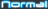
<style>
.page{position:relative;width:48px;height:9px;background:#333333}
.page>*{position:absolute;margin:0}
.t1{font:10px "ThundergodII";color:#ffffff}
</style>
<div class="page">
<p class="t1" style="left:1px;top:1px;width:46px;height:7px">Normal</p>
</div>
